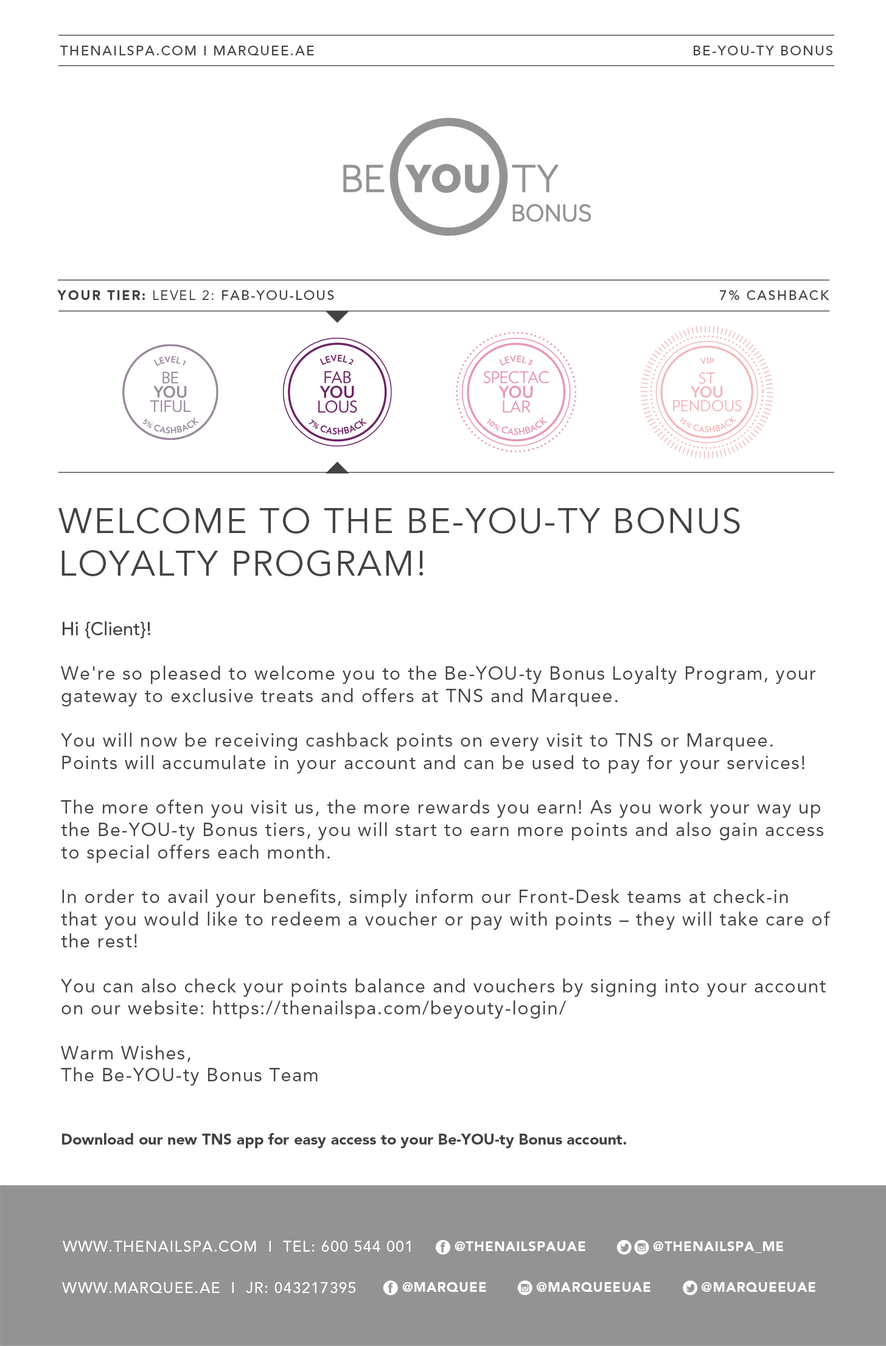
<style>
.page{position:relative;width:886px;height:1346px;background:#ffffff}
.page>*{position:absolute;margin:0}
.t1{font:13.5px "AvenirLTStd-Medium";letter-spacing:0.1em;color:#424242}
.t2{font:13.5px "AvenirLTStd-Medium";letter-spacing:0.099em;color:#424242}
.t3{font:13.5px "AvenirLTStd-Black";letter-spacing:0.1em;color:#424242}
.t4{font:13.5px "AvenirLTStd-Black";letter-spacing:0.099em;color:#424242}
.t5{font:13.5px "AvenirLTStd-Roman";letter-spacing:0.1em;color:#424242}
.t6{font:35.5px "AvenirLTStd-Book";letter-spacing:0.04em;color:#424242}
.t7{font:18.6px "AvenirLTStd-Roman";letter-spacing:0.055em;color:#424242}
.t8{font:18.6px "AvenirLTStd-Medium";color:#424242}
.t9{font:15.2px "AvenirLTStd-Black";color:#424242}
.t10{font:15.2px "AvenirLTStd-Medium";letter-spacing:0.05em;color:#ffffff}
.t11{font:13.5px "AvenirLTStd-Black";letter-spacing:0.04em;color:#ffffff}
.t12{font:13.5px "AvenirLTStd-Black";letter-spacing:0.039em;color:#ffffff}
.t13{font:13.5px "AvenirLTStd-Black";color:#ffffff}
</style>
<div class="page">
<p class="t1" style="left:60px;top:46px;width:254px;height:9px">THENAILSPA.COM I MARQUEE.AE</p>
<p class="t1" style="left:694px;top:46px;width:138px;height:9px">BE-YOU-TY BONUS</p>
<p class="t2" style="left:57px;top:290px;width:277px;height:10px"><span class="t3">YOUR TIE</span><span class="t4">R</span><span class="t3">:</span><span class="t5"> LEVEL 2: </span>FAB-YOU-LOUS</p>
<p class="t1" style="left:720px;top:290px;width:109px;height:11px">7% CASHBACK</p>
<p class="t6" style="left:58px;top:507px;width:682px;height:69px">WELCOME TO THE BE-YOU-TY BONUS<br>LOYALTY PROGRAM!</p>
<p class="t7" style="left:61px;top:621px;width:769px;height:527px"><span class="t8">Hi {Client}!<br><br></span>We're so pleased to welcome you to the Be-YOU-ty Bonus Loyalty Program, your gateway to exclusive treats and offers at TNS and Marquee.<br><br>You will now be receiving cashback points on every visit to TNS or Marquee. Points will accumulate in your account and can be used to pay for your services! <br><br>The more often you visit us, the more rewards you earn! As you work your way up the Be-YOU-ty Bonus tiers, you will start to earn more points and also gain access to special offers each month.<br><br>In order to avail your benefits, simply inform our Front-Desk teams at check-in that you would like to redeem a voucher or pay with points – they will take care of the rest!<br><br>You can also check your points balance and vouchers by signing into your account on our website: https://thenailspa.com/beyouty-login/<br><br>Warm Wishes,<br>The Be-YOU-ty Bonus Team<br><br><br><span class="t9">Download our new TNS app for easy access to your Be-YOU-ty Bonus account.</span></p>
<p class="t10" style="left:63px;top:1241px;width:348px;height:11px">WWW.THENAILSPA.COM  I  TEL: 600 544 001</p>
<p class="t11" style="left:455px;top:1241px;width:130px;height:10px">@THENAILSPAUAE</p>
<p class="t11" style="left:653px;top:1241px;width:130px;height:12px">@THENAILSPA_ME</p>
<p class="t10" style="left:62px;top:1282px;width:293px;height:11px">WWW.MARQUEE.AE  I  JR: 043217395</p>
<p class="t11" style="left:402px;top:1282px;width:84px;height:10px">@M<span class="t12">A</span>RQ<span class="t12">U</span>E<span class="t13">E</span></p>
<p class="t11" style="left:537px;top:1282px;width:113px;height:10px">@M<span class="t12">AR</span>Q<span class="t12">U</span>EE<span class="t12">UA</span><span class="t13">E</span></p>
<p class="t11" style="left:702px;top:1282px;width:113px;height:10px">@MA<span class="t12">R</span>Q<span class="t12">U</span>EE<span class="t12">UA</span><span class="t13">E</span></p>
</div>
